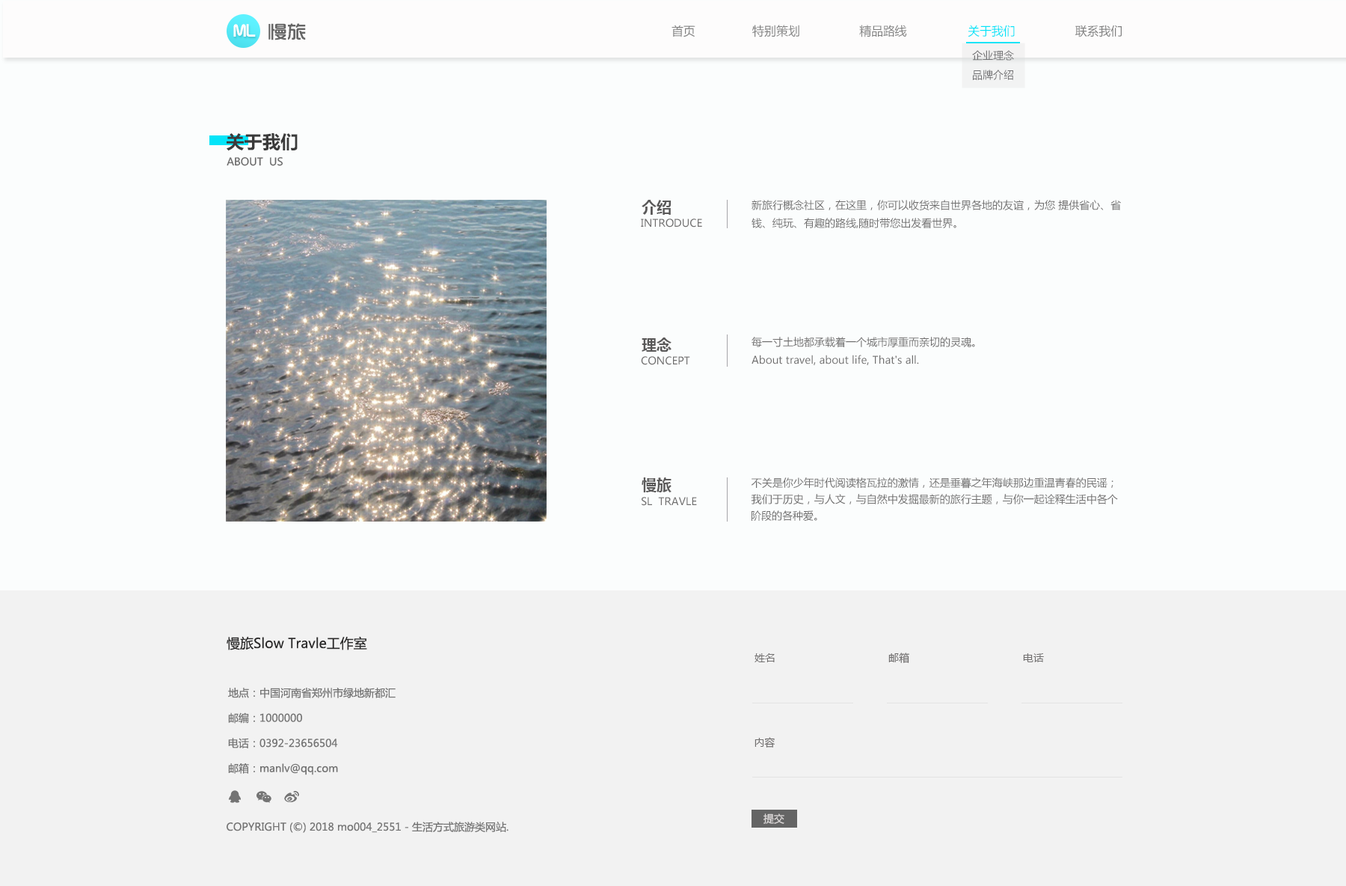
<style>
.page{position:relative;width:1346px;height:886px;background:#fbfdfd}
.page>*{position:absolute;margin:0}
.t1{font:16.5px "TRENDS";color:#ffffff}
.t2{font:19.2px "TRENDS";color:#666666}
.t3{font:12px "MicrosoftYaHei";color:#818181}
.t4{font:12px "MicrosoftYaHei";color:#04e4f8}
.t5{font:10.5px "MicrosoftYaHei";color:#737375}
.t6{font:18px "MicrosoftYaHei-Bold";color:#3b3b3b}
.t7{font:10.5px "MicrosoftYaHei";color:#656565}
.t8{font:15px "MicrosoftYaHei-Bold";color:#5a5959}
.t9{font:10.5px/18px "MicrosoftYaHei";color:#706f6f}
.t10{font:10.5px "MicrosoftYaHei";color:#706f6f;text-transform:uppercase}
.t11{font:10.5px/16.5px "MicrosoftYaHei";color:#706f6f}
.t12{font:13.5px "MicrosoftYaHei";color:#292828}
.t13{font:10.5px "MicrosoftYaHei";color:#716f6f}
.t14{font:10.5px "MicrosoftYaHei";color:#747474}
.t15{font:10.5px "MicrosoftYaHei";color:#e0dcdc}
</style>
<div class="page">
<p class="t1" style="left:233px;top:24px;width:23px;height:13px">ML</p>
<p class="t2" style="left:269px;top:23px;width:37px;height:17px">慢旅</p>
<p class="t3" style="left:672px;top:25px;width:24px;height:12px;rotate:1deg">首页</p>
<p class="t3" style="left:752px;top:25px;width:48px;height:12px">特别策划</p>
<p class="t3" style="left:859px;top:25px;width:48px;height:12px">精品路线</p>
<p class="t4" style="left:968px;top:25px;width:47px;height:12px">关于我们</p>
<p class="t3" style="left:1076px;top:25px;width:46px;height:12px">联系我们</p>
<p class="t5" style="left:972px;top:50px;width:42px;height:11px">企业理念</p>
<p class="t5" style="left:973px;top:70px;width:41px;height:10px">品牌介绍</p>
<p class="t6" style="left:227px;top:133px;width:71px;height:18px">关于我们</p>
<p class="t7" style="left:227px;top:157px;width:56px;height:9px">ABOUT  US</p>
<p class="t8" style="left:642px;top:200px;width:30px;height:15px">介绍</p>
<p class="t9" style="left:752px;top:200px;width:369px;height:28px">新旅行概念社区，在这里，你可以收货来自世界各地的友谊，为您 提供省心、省<br>钱、纯玩、有趣的路线,随时带您出发看世界。</p>
<p class="t10" style="left:641px;top:218px;width:61px;height:9px">Introduce</p>
<p class="t8" style="left:642px;top:337px;width:30px;height:15px">理念</p>
<p class="t9" style="left:752px;top:337px;width:223px;height:28px">每一寸土地都承载着一个城市厚重而亲切的灵魂。<br>About travel, about life, That's all.</p>
<p class="t10" style="left:641px;top:356px;width:49px;height:9px">Concept</p>
<p class="t8" style="left:642px;top:477px;width:30px;height:15px">慢旅</p>
<p class="t11" style="left:751px;top:477px;width:367px;height:44px;text-align:center">不关是你少年时代阅读格瓦拉的激情，还是垂暮之年海峡那边重温青春的民谣；<br>                                                                                               我们于历史，与人文，与自然中发掘最新的旅行主题，与你一起诠释生活中各个<br>阶段的各种爱。</p>
<p class="t10" style="left:642px;top:497px;width:55px;height:9px">SL  TRAVLE</p>
<p class="t12" style="left:227px;top:636px;width:140px;height:14px">慢旅Slow Travle工作室</p>
<p class="t13" style="left:755px;top:653px;width:20px;height:9px">姓名</p>
<p class="t13" style="left:889px;top:652px;width:21px;height:11px">邮箱</p>
<p class="t13" style="left:1023px;top:653px;width:21px;height:9px">电话</p>
<p class="t14" style="left:228px;top:687px;width:168px;height:88px">地点：中国河南省郑州市绿地新都汇<br><br>邮编：1000000<br><br>电话：0392-23656504<br><br>邮箱：manlv@qq.com</p>
<p class="t13" style="left:755px;top:737px;width:20px;height:10px">内容</p>
<p class="t14" style="left:227px;top:821px;width:282px;height:12px">COPYRIGHT (©) 2018 mo004_2551 - 生活方式旅游类网站.</p>
<p class="t15" style="left:764px;top:813px;width:21px;height:11px">提交</p>
</div>
